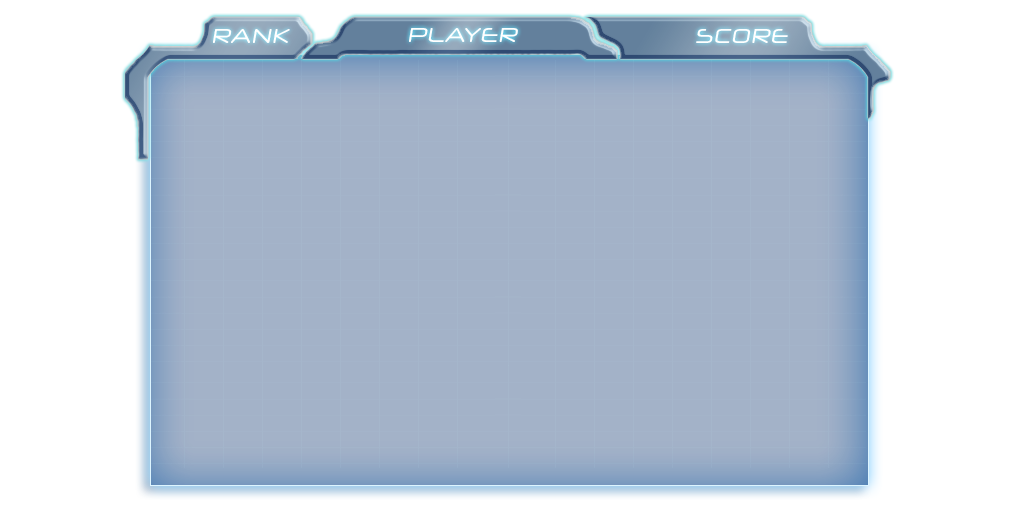
<style>
.page{position:relative;width:1024px;height:512px;background:#a3b2c8}
.page>*{position:absolute;margin:0}
.t1{font:20px "NeuropolXFree";color:#ffffff;font-style:italic}
</style>
<div class="page">
<p class="t1" style="left:213px;top:29px;width:77px;height:14px">RANK</p>
<p class="t1" style="left:409px;top:28px;width:109px;height:14px">PLAYER</p>
<p class="t1" style="left:696px;top:29px;width:92px;height:14px">SCORE</p>
</div>
